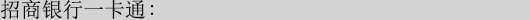
<style>
.page{position:relative;width:530px;height:20px;background:#d3d3d3}
.page>*{position:absolute;margin:0}
.t1{font:20.8px "SimSun";color:#0e1010}
</style>
<div class="page">
<p class="t1" style="left:0px;top:0px;width:146px;height:20px">招商银行一卡通</p>
<p class="t1" style="left:150px;top:4px;width:4px;height:11px">:</p>
</div>
